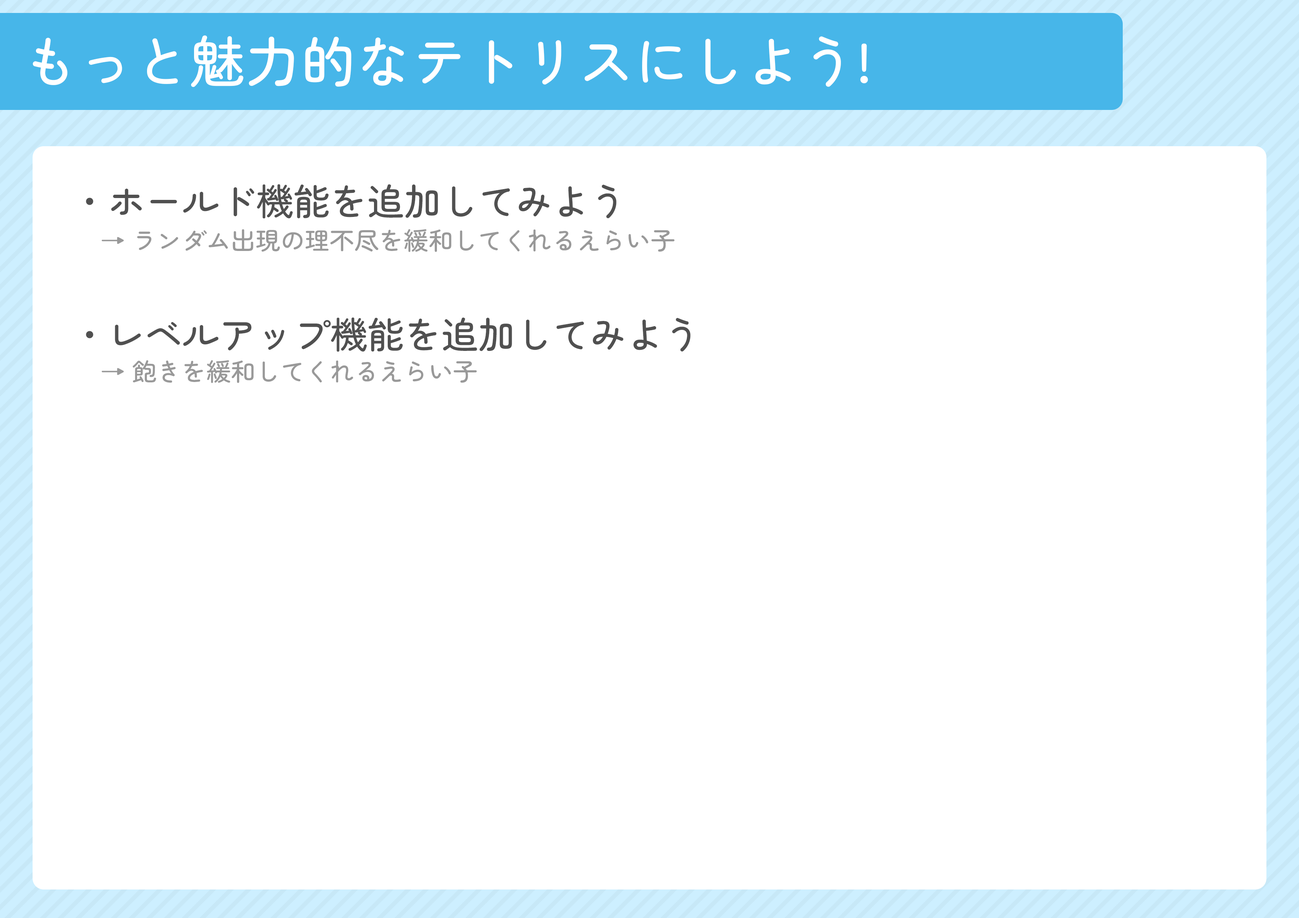
<style>
.page{position:relative;width:1299px;height:918px;background:#ffffff}
.page>*{position:absolute;margin:0}
.t1{font:55.5px "ZenMaruGothic-Medium";color:#ffffff}
.t2{font:37px "ZenMaruGothic-Medium";color:#505050}
.t3{font:24.7px "ZenMaruGothic-Medium";color:#999999}
</style>
<div class="page">
<p class="t1" style="left:33px;top:35px;width:835px;height:52px">もっと魅力的なテトリスにしよう!</p>
<p class="t2" style="left:86px;top:184px;width:604px;height:168px">・ホールド機能を追加してみよう<br><br><br>・レベルアップ機能を追加してみよう</p>
<p class="t3" style="left:101px;top:229px;width:574px;height:23px">→ ランダム出現の理不尽を緩和してくれるえらい子</p>
<p class="t3" style="left:101px;top:360px;width:376px;height:23px">→ 飽きを緩和してくれるえらい子</p>
</div>
